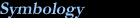
<style>
.page{position:relative;width:140px;height:18px;background:#000000}
.page>*{position:absolute;margin:0}
.t1{font:18px "Garamond-Bold";color:#99ccff;font-style:italic}
</style>
<div class="page">
<p class="t1" style="left:0px;top:2px;width:85px;height:17px">Symbology</p>
</div>
